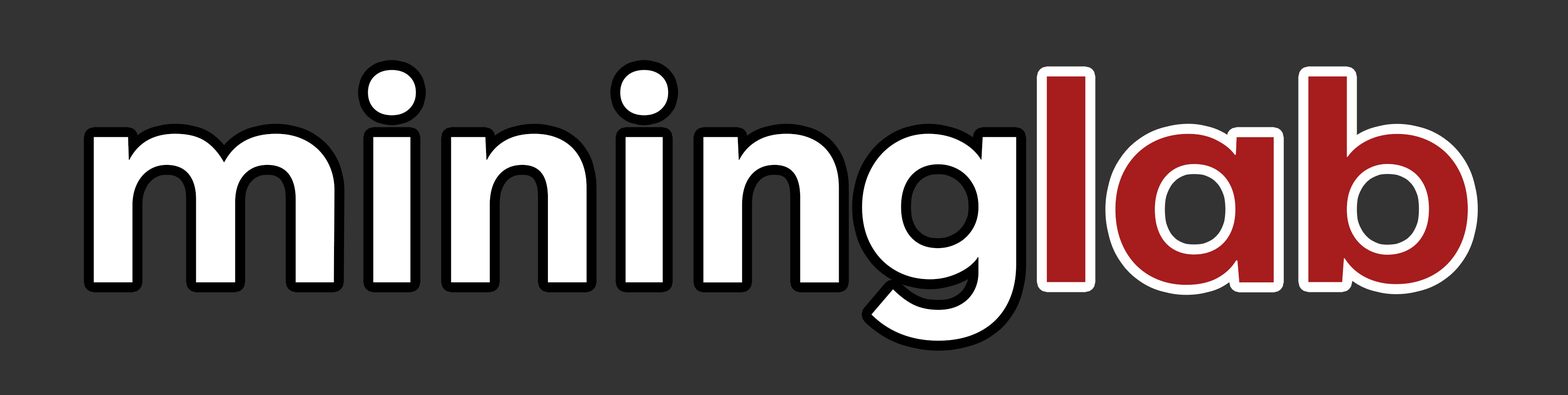
<style>
.page{position:relative;width:1568px;height:395px;background:#333333}
.page>*{position:absolute;margin:0}
.t1{font:320.7px "Tenorite-Bold";color:#ffffff}
.t2{font:320.7px "Tenorite-Bold";color:#a71c1d}
</style>
<div class="page">
<p class="t1" style="left:94px;top:70px;width:922px;height:271px">mining</p>
<p class="t2" style="left:1047px;top:76px;width:421px;height:209px">lab</p>
</div>
